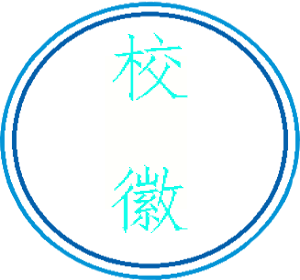
<style>
.page{position:relative;width:300px;height:280px;background:#ffffff}
.page>*{position:absolute;margin:0}
.t1{font:75.4px "·ÂËÎ";color:#12ffeb;scale:1.15 1}
</style>
<div class="page">
<p class="t1" style="left:111px;top:32px;width:77px;height:201px">校<br>徽</p>
</div>
